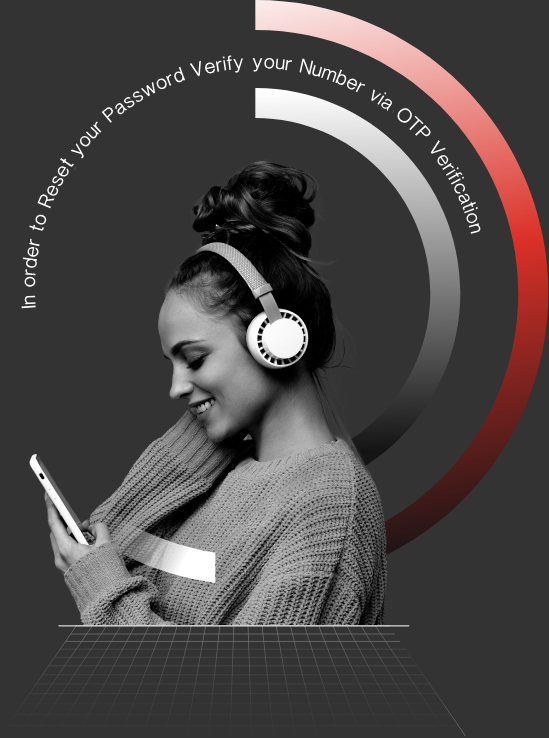
<style>
.page{position:relative;width:549px;height:738px;background:#333333}
.page>*{position:absolute;margin:0}
.t1{font:20px "Obadiah-Medium";color:#ffffff}
</style>
<div class="page">
<p class="t1" style="left:21px;top:55px;width:460px;height:254px;rotate:-10deg">In order to Reset your Password Verify your Number via OTP Verification</p>
</div>
